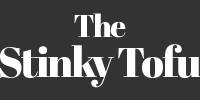
<style>
.page{position:relative;width:200px;height:100px;background:#333333}
.page>*{position:absolute;margin:0}
.t1{font:31.1px "AbrilFatface-Regular";letter-spacing:-0.05em;color:#ffffff}
.t2{font:42.1px "AbrilFatface-Regular";letter-spacing:-0.05em;color:#ffffff}
</style>
<div class="page">
<p class="t1" style="left:74px;top:13px;width:52px;height:25px">The</p>
<p class="t2" style="left:0px;top:44px;width:201px;height:44px">Stinky Tofu</p>
</div>
